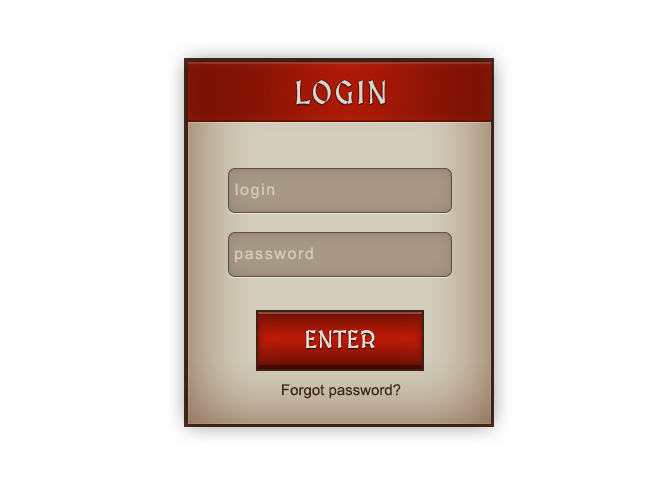
<style>
.page{position:relative;width:650px;height:500px;background:#ffffff}
.page>*{position:absolute;margin:0}
.t1{font:32px "MedievalSharp";letter-spacing:0.06em;color:#d8d5d0;text-transform:uppercase}
.t2{font:16px "ArialMT";letter-spacing:0.1em;color:#d3ccba}
.t3{font:24px "MedievalSharp";letter-spacing:0.04em;color:#e4e0d5;text-transform:uppercase}
.t4{font:15px "ArialMT";color:#402517}
</style>
<div class="page">
<p class="t1" style="left:296px;top:80px;width:89px;height:25px">Login</p>
<p class="t2" style="left:235px;top:183px;width:40px;height:16px">login</p>
<p class="t2" style="left:235px;top:247px;width:78px;height:16px">password</p>
<p class="t3" style="left:306px;top:330px;width:69px;height:18px">enter</p>
<p class="t4" style="left:282px;top:384px;width:119px;height:15px">Forgot password?</p>
</div>
